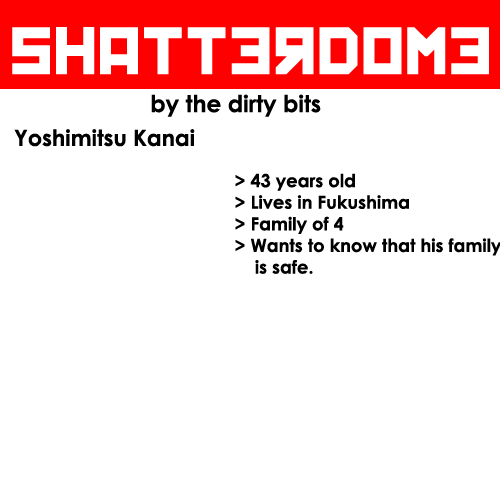
<style>
.page{position:relative;width:500px;height:500px;background:#ffffff}
.page>*{position:absolute;margin:0}
.t1{font:63.3px "Kremlin";color:#ffffff}
.t2{font:23.2px "CenturyGothic-Bold";color:#000000}
.t3{font:22.3px "CenturyGothic-Bold";color:#000000}
.t4{font:18px "CenturyGothic-Bold";color:#000000}
</style>
<div class="page">
<p class="t1" style="left:12px;top:27px;width:477px;height:48px">Shatterdome</p>
<p class="t2" style="left:151px;top:94px;width:170px;height:23px">by the dirty bits</p>
<p class="t3" style="left:14px;top:129px;width:181px;height:18px">Yoshimitsu Kanai</p>
<p class="t4" style="left:235px;top:173px;width:267px;height:101px">&gt; 43 years old<br>&gt; Lives in Fukushima<br>&gt; Family of 4<br>&gt; Wants to know that his family <br>    is safe.</p>
</div>
